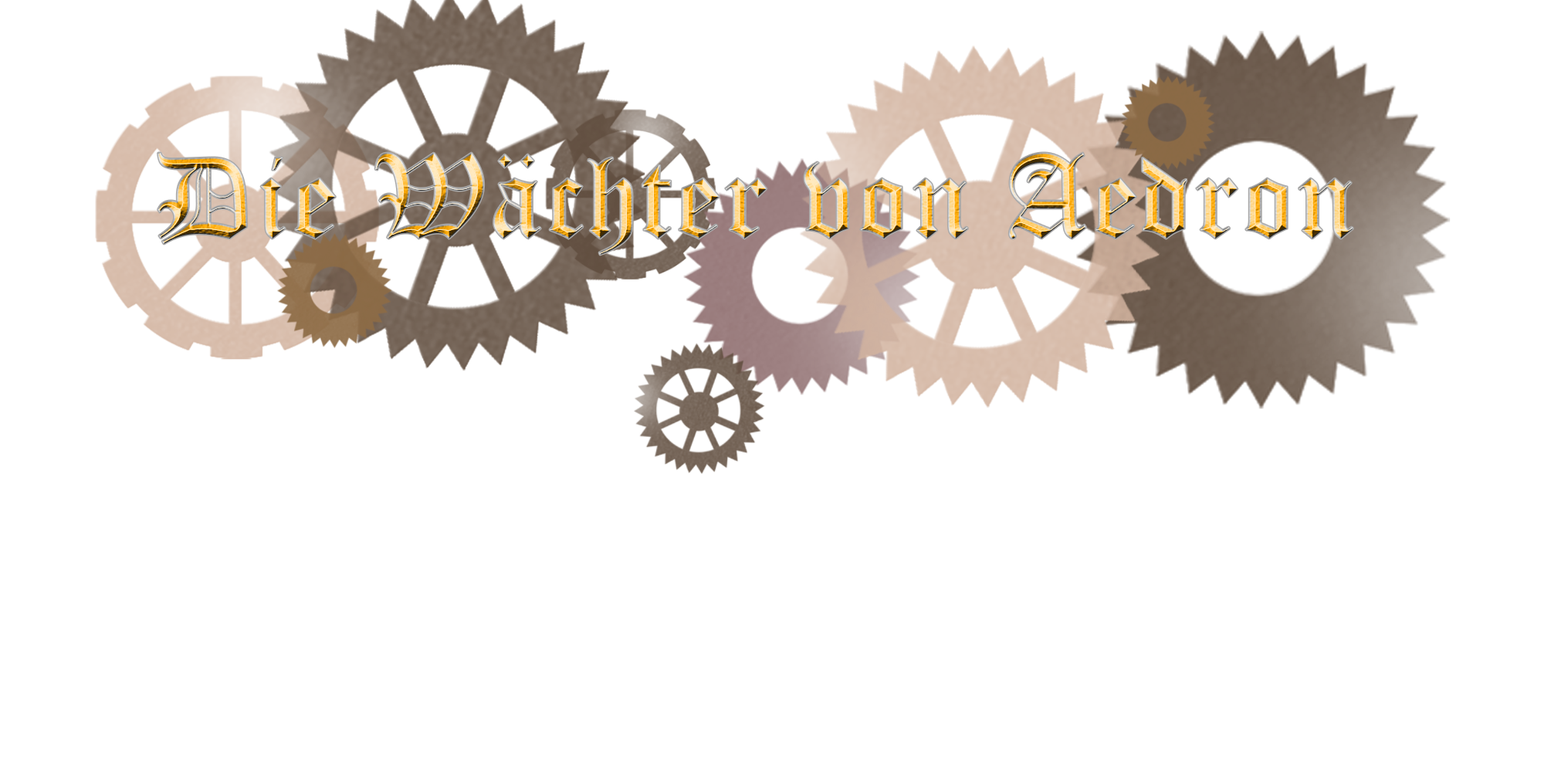
<style>
.page{position:relative;width:1544px;height:772px;background:#ffffff}
.page>*{position:absolute;margin:0}
.t1{font:115.8px "OldEnglishTextMT";letter-spacing:0.02em}
</style>
<div class="page">
<p class="t1" style="left:158px;top:153px;width:1196px;height:102px">Die Wächter von Aedron</p>
</div>
